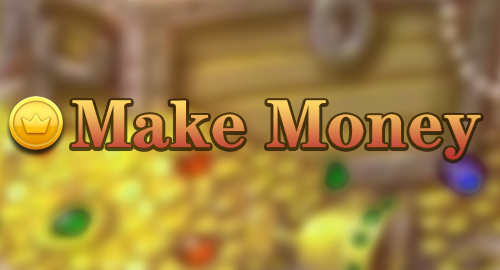
<style>
.page{position:relative;width:500px;height:270px}
.page>*{position:absolute;margin:0}
.t1{font:68px "FZCHSJW--GB1-0"}
</style>
<div class="page">
<p class="t1" style="left:72px;top:100px;width:409px;height:60px">Make Money</p>
</div>
